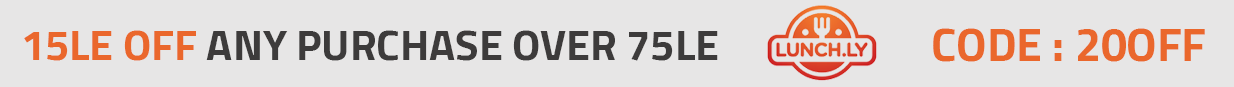
<style>
.page{position:relative;width:1234px;height:87px;background:#e7e6e6}
.page>*{position:absolute;margin:0}
.t1{font:43.3px "Cairo-Bold";color:#3d3b3b}
.t2{font:43.3px "Cairo-Bold";color:#ea672c}
.t3{font:46.7px "Cairo-Bold";color:#ea672c}
</style>
<div class="page">
<p class="t1" style="left:24px;top:30px;width:694px;height:31px"><span class="t2">15LE OFF </span>ANY PURCHASE OVER 75LE</p>
<p class="t3" style="left:933px;top:28px;width:272px;height:34px">CODE : 20OFF</p>
</div>
